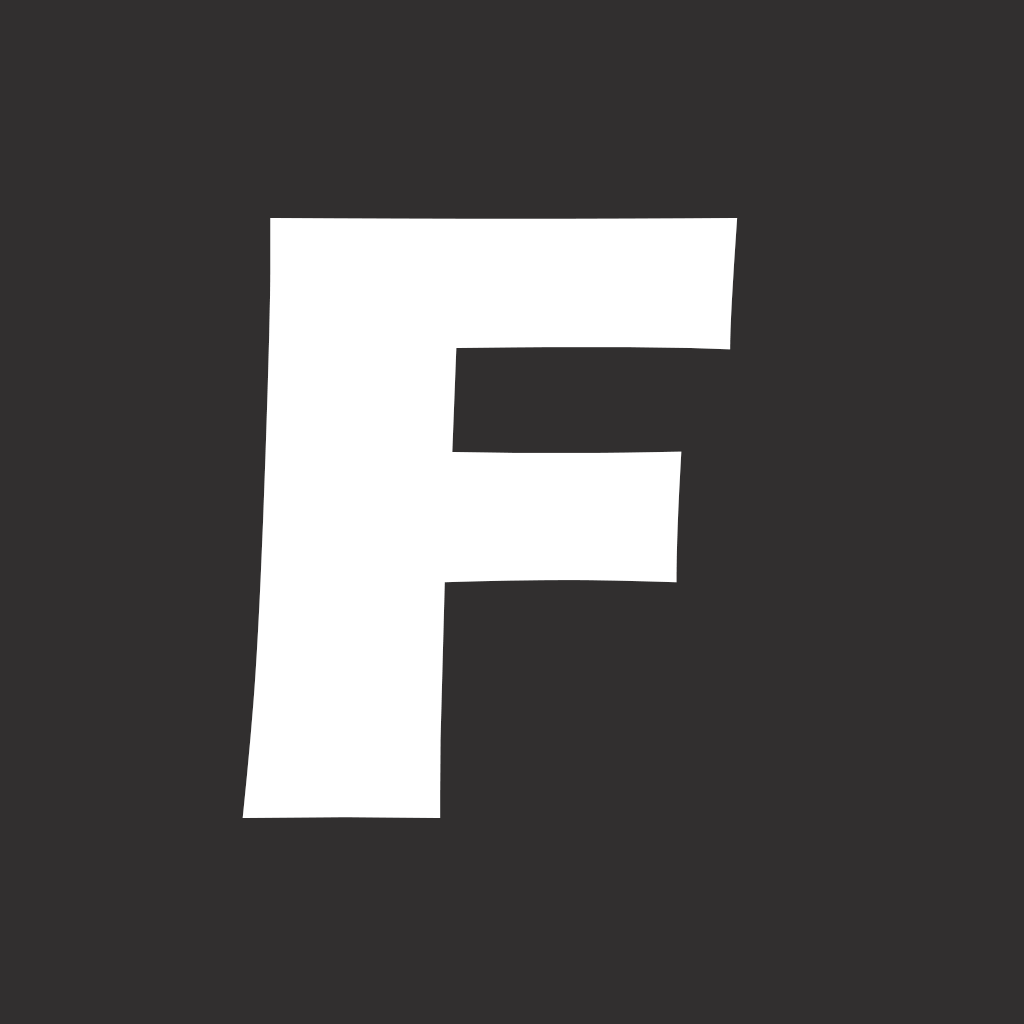
<style>
.page{position:relative;width:1024px;height:1024px;background:#312f2f}
.page>*{position:absolute;margin:0}
.t1{font:900px "ErasITC-Bold";color:#ffffff}
</style>
<div class="page">
<p class="t1" style="left:242px;top:217px;width:496px;height:601px">F</p>
</div>
